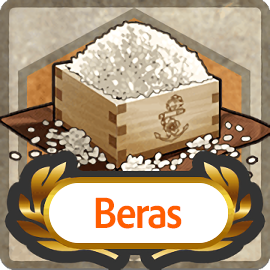
<style>
.page{position:relative;width:270px;height:270px}
.page>*{position:absolute;margin:0}
.t1{font:45px "AdobeClean-Bold";letter-spacing:-0.04em;color:#ff5d00;scale:0.9 1}
</style>
<div class="page">
<p class="t1" style="left:95px;top:197px;width:87px;height:32px">Beras</p>
</div>
